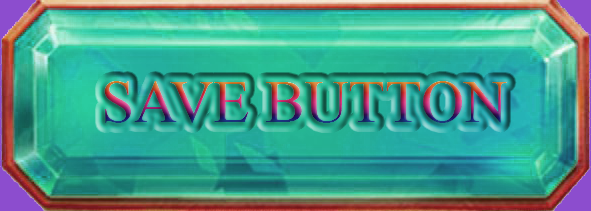
<style>
.page{position:relative;width:591px;height:211px}
.page>*{position:absolute;margin:0}
.t1{font:60px "TimesNewRomanPSMT"}
</style>
<div class="page">
<p class="t1" style="left:104px;top:81px;width:403px;height:42px">SAVE BUTTON</p>
</div>
